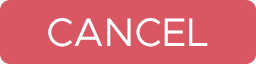
<style>
.page{position:relative;width:256px;height:64px;background:#d95763}
.page>*{position:absolute;margin:0}
.t1{font:40px "Metropolis-Regular";color:#ffffff}
</style>
<div class="page">
<p class="t1" style="left:48px;top:18px;width:160px;height:29px">CANCEL</p>
</div>
